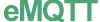
<style>
.page{position:relative;width:100px;height:22px;background:#ffffff}
.page>*{position:absolute;margin:0}
.t1{font:30px "Arial-BoldMT";letter-spacing:-0.05em;color:#4ba575}
</style>
<div class="page">
<p class="t1" style="left:4px;top:0px;width:94px;height:23px">eMQTT</p>
</div>
